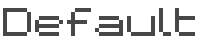
<style>
.page{position:relative;width:200px;height:45px;background:#ffffff}
.page>*{position:absolute;margin:0}
.t1{font:36px "BMspaceA9";color:#474748}
</style>
<div class="page">
<p class="t1" style="left:3px;top:8px;width:192px;height:28px">Default</p>
</div>
